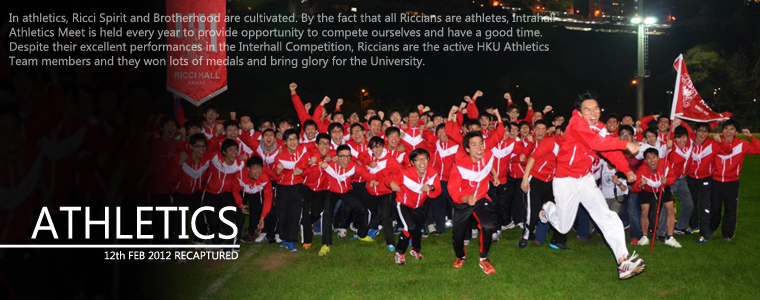
<style>
.page{position:relative;width:760px;height:300px}
.page>*{position:absolute;margin:0}
.t1{font:12px "SegoeUI";color:#9d9e9e}
</style>
<div class="page">
<p class="t1" style="left:9px;top:12px;width:546px;height:56px">In athletics, Ricci Spirit and Brotherhood are cultivated. By the fact that all Riccians are athletes, Intrahall Athletics Meet is held every year to provide opportunity to compete ourselves and have a good time. Despite their excellent performances in the Interhall Competition, Riccians are the active HKU Athletics Team members and they won lots of medals and bring glory for the University.</p>
</div>
